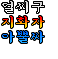
<style>
.page{position:relative;width:58px;height:59px;background:#ffffff}
.page>*{position:absolute;margin:0}
.t1{font:15px "Sam3KRFont";color:#ffffff}
.t2{font:15px "Sam3KRFont";color:#efefef}
.t3{font:15px "Sam3KRFont"}
</style>
<div class="page">
<p class="t1" style="left:2px;top:1px;width:42px;height:12px">얼씨구</p>
<p class="t2" style="left:2px;top:1px;width:42px;height:12px">얼씨구</p>
<p class="t3" style="left:2px;top:16px;width:42px;height:12px">지화자</p>
<p class="t3" style="left:2px;top:31px;width:42px;height:12px">아뿔싸</p>
</div>
